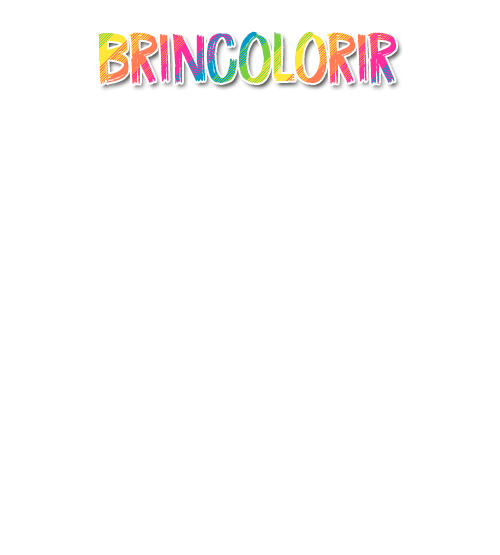
<style>
.page{position:relative;width:500px;height:555px;background:#ffffff}
.page>*{position:absolute;margin:0}
.t1{font:72px "DKCoalBrush-Regular"}
</style>
<div class="page">
<p class="t1" style="left:98px;top:31px;width:299px;height:54px">Brincolorir</p>
</div>
